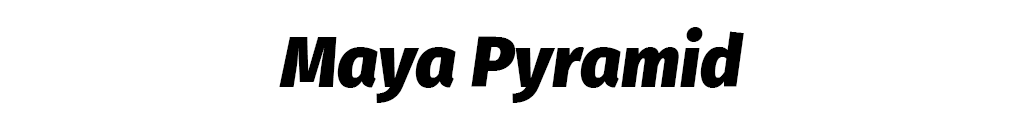
<style>
.page{position:relative;width:1024px;height:128px;background:#ffffff}
.page>*{position:absolute;margin:0}
.t1{font:71.8px "FiraSans-BlackItalic";color:#000000}
</style>
<div class="page">
<p class="t1" style="left:279px;top:27px;width:465px;height:76px">Maya Pyramid</p>
</div>
